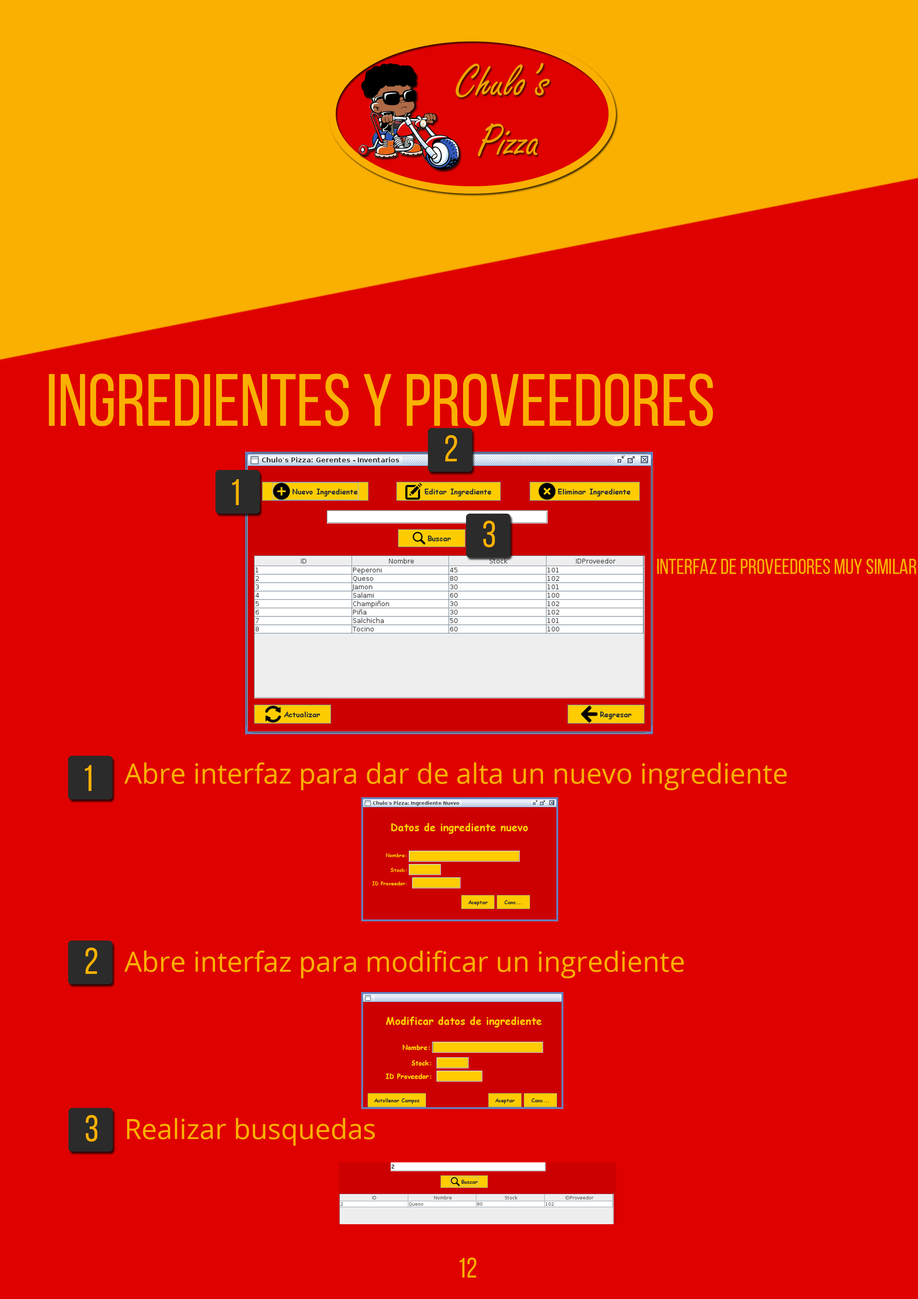
<style>
.page{position:relative;width:918px;height:1299px;background:#df0000}
.page>*{position:absolute;margin:0}
.t1{font:74px "BebasNeueRegular";color:#fab000}
.t2{font:37px "BebasNeueRegular";color:#fab000}
.t3{font:21.6px "BebasNeueRegular";color:#fab000}
.t4{font:27.8px "OpenSans";color:#fab000}
.t5{font:27.8px "BebasNeueRegular";color:#fab000}
</style>
<div class="page">
<p class="t1" style="left:49px;top:373px;width:664px;height:53px">ingredientes y proveedores</p>
<p class="t2" style="left:445px;top:435px;width:12px;height:26px">2</p>
<p class="t2" style="left:232px;top:479px;width:7px;height:26px">1</p>
<p class="t2" style="left:483px;top:521px;width:12px;height:26px">3</p>
<p class="t3" style="left:657px;top:558px;width:260px;height:16px">interfaz de proveedores muy similar</p>
<p class="t2" style="left:85px;top:765px;width:6px;height:26px">1</p>
<p class="t4" style="left:124px;top:762px;width:663px;height:28px">Abre interfaz para dar de alta un nuevo ingrediente</p>
<p class="t2" style="left:86px;top:947px;width:11px;height:27px">2</p>
<p class="t4" style="left:124px;top:950px;width:560px;height:28px">Abre interfaz para modificar un ingrediente</p>
<p class="t2" style="left:86px;top:1115px;width:11px;height:26px">3</p>
<p class="t4" style="left:127px;top:1118px;width:248px;height:27px">Realizar busquedas</p>
<p class="t5" style="left:459px;top:1257px;width:17px;height:20px">12</p>
</div>
